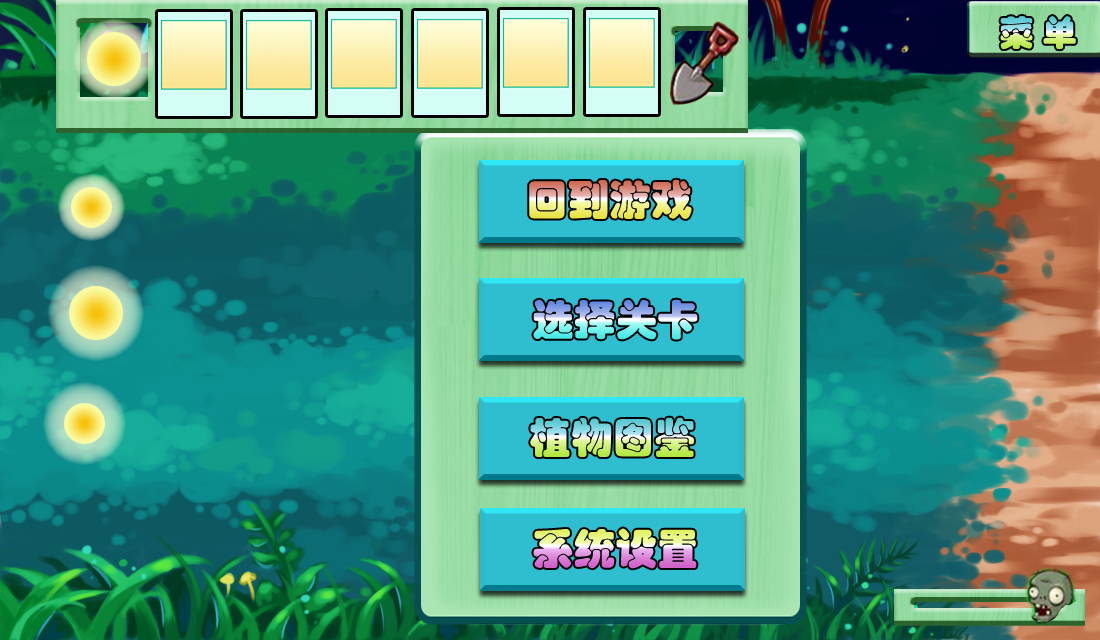
<style>
.page{position:relative;width:1100px;height:640px}
.page>*{position:absolute;margin:0}
.t1{font:41.7px "STHupo"}
</style>
<div class="page">
<p class="t1" style="left:529px;top:179px;width:163px;height:40px">回到游戏</p>
<p class="t1" style="left:533px;top:299px;width:165px;height:41px">选择关卡</p>
<p class="t1" style="left:530px;top:417px;width:164px;height:40px">植物图鉴</p>
<p class="t1" style="left:533px;top:528px;width:164px;height:41px">系统设置</p>
</div>
